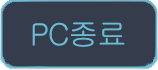
<style>
.page{position:relative;width:158px;height:70px;background:#353c4b}
.page>*{position:absolute;margin:0}
.t1{font:30px "Gulim";letter-spacing:-0.04em;color:#6bbdd5}
</style>
<div class="page">
<p class="t1" style="left:32px;top:22px;width:93px;height:25px">PC종료</p>
</div>
